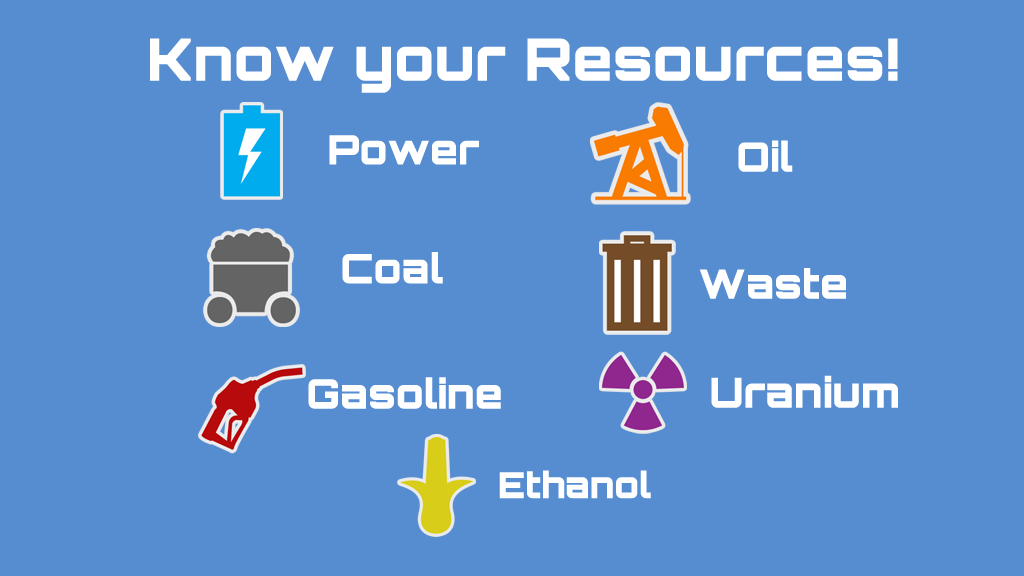
<style>
.page{position:relative;width:1024px;height:576px;background:#568dd1}
.page>*{position:absolute;margin:0}
.t1{font:58.3px "Orbitron-Black";color:#ffffff}
.t2{font:40.4px "Orbitron-Black";color:#ffffff}
.t3{font:41.3px "Orbitron-Black";color:#ffffff}
.t4{font:35.6px "Orbitron-Black";color:#ffffff}
</style>
<div class="page">
<p class="t1" style="left:150px;top:38px;width:748px;height:55px">Know your Resources!</p>
<p class="t2" style="left:329px;top:135px;width:150px;height:30px">Power</p>
<p class="t2" style="left:738px;top:140px;width:55px;height:32px">Oil</p>
<p class="t2" style="left:342px;top:252px;width:101px;height:32px">Coal</p>
<p class="t2" style="left:699px;top:268px;width:147px;height:31px">Waste</p>
<p class="t2" style="left:308px;top:377px;width:193px;height:32px">Gasoline</p>
<p class="t3" style="left:711px;top:375px;width:187px;height:33px">Uranium</p>
<p class="t4" style="left:499px;top:470px;width:152px;height:29px">Ethanol</p>
</div>
